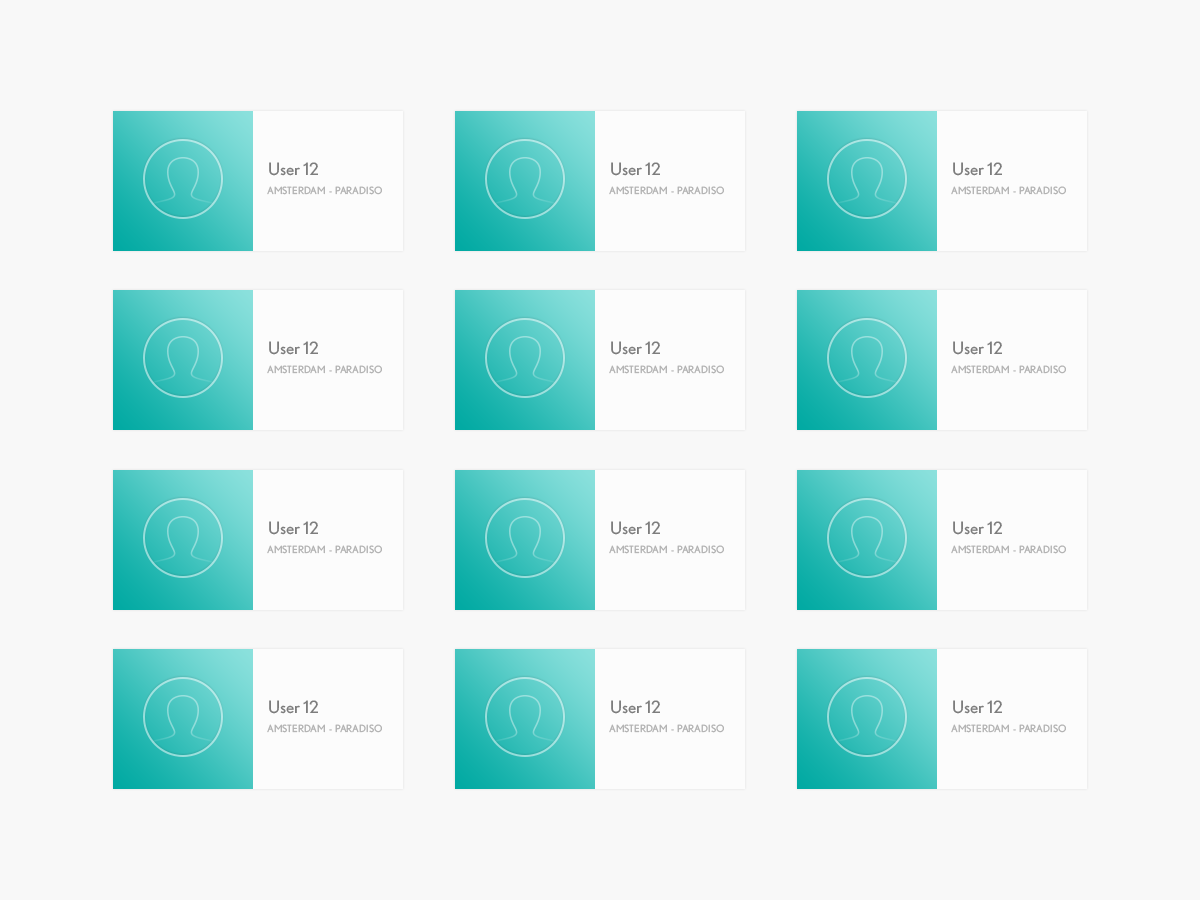
<style>
.page{position:relative;width:1200px;height:900px;background:#f8f8f8}
.page>*{position:absolute;margin:0}
.t1{font:17px "Nobel-Regular";color:#7d7d7d}
.t2{font:10px "Nobel-Regular";color:#b4b4b4;text-transform:uppercase}
</style>
<div class="page">
<p class="t1" style="left:269px;top:162px;width:49px;height:14px">User 12</p>
<p class="t1" style="left:611px;top:162px;width:49px;height:14px">User 12</p>
<p class="t1" style="left:953px;top:162px;width:49px;height:14px">User 12</p>
<p class="t2" style="left:267px;top:186px;width:115px;height:9px">Amsterdam  -  paradiso</p>
<p class="t2" style="left:609px;top:186px;width:115px;height:9px">Amsterdam  -  paradiso</p>
<p class="t2" style="left:951px;top:186px;width:115px;height:9px">Amsterdam  -  paradiso</p>
<p class="t1" style="left:269px;top:341px;width:49px;height:14px">User 12</p>
<p class="t1" style="left:611px;top:341px;width:49px;height:14px">User 12</p>
<p class="t1" style="left:953px;top:341px;width:49px;height:14px">User 12</p>
<p class="t2" style="left:267px;top:365px;width:115px;height:9px">Amsterdam  -  paradiso</p>
<p class="t2" style="left:609px;top:365px;width:115px;height:9px">Amsterdam  -  paradiso</p>
<p class="t2" style="left:951px;top:365px;width:115px;height:9px">Amsterdam  -  paradiso</p>
<p class="t1" style="left:269px;top:521px;width:49px;height:14px">User 12</p>
<p class="t1" style="left:611px;top:521px;width:49px;height:14px">User 12</p>
<p class="t1" style="left:953px;top:521px;width:49px;height:14px">User 12</p>
<p class="t2" style="left:267px;top:545px;width:115px;height:9px">Amsterdam  -  paradiso</p>
<p class="t2" style="left:609px;top:545px;width:115px;height:9px">Amsterdam  -  paradiso</p>
<p class="t2" style="left:951px;top:545px;width:115px;height:9px">Amsterdam  -  paradiso</p>
<p class="t1" style="left:269px;top:700px;width:49px;height:14px">User 12</p>
<p class="t1" style="left:611px;top:700px;width:49px;height:14px">User 12</p>
<p class="t1" style="left:953px;top:700px;width:49px;height:14px">User 12</p>
<p class="t2" style="left:267px;top:724px;width:115px;height:9px">Amsterdam  -  paradiso</p>
<p class="t2" style="left:609px;top:724px;width:115px;height:9px">Amsterdam  -  paradiso</p>
<p class="t2" style="left:951px;top:724px;width:115px;height:9px">Amsterdam  -  paradiso</p>
</div>
